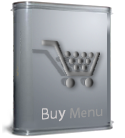
<style>
.page{position:relative;width:125px;height:138px;background:#ffffff}
.page>*{position:absolute;margin:0}
.t1{font:16px "Myriad-Roman";color:#d1cdcd}
.t2{font:14px "Myriad-Roman";color:#999999}
</style>
<div class="page">
<p class="t1" style="left:42px;top:108px;width:24px;height:14px">Buy</p>
<p class="t2" style="left:70px;top:107px;width:33px;height:12px">Menu</p>
</div>
